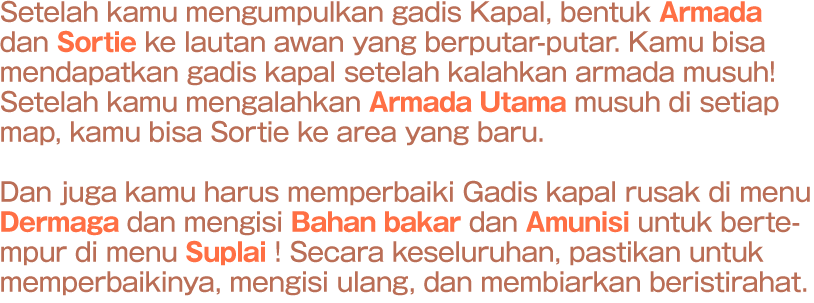
<style>
.page{position:relative;width:814px;height:303px;background:#ffffff}
.page>*{position:absolute;margin:0}
.t1{font:26px/30px "GothicMB101Pro-Medium";letter-spacing:-0.02em;color:#ba6e56;scale:0.95 1}
.t2{font:26px/30px "GothicMB101Pro-Bold";letter-spacing:-0.02em;color:#ff6f44;scale:0.95 1}
</style>
<div class="page">
<p class="t1" style="left:0px;top:0px;width:810px;height:296px">Setelah kamu mengumpulkan gadis Kapal, bentuk <span class="t2">Armada</span> <br>dan <span class="t2">Sortie</span> ke lautan awan yang berputar-putar. Kamu bisa <br>mendapatkan gadis kapal setelah kalahkan armada musuh!<br>Setelah kamu mengalahkan <span class="t2">Armada Utama</span> musuh di setiap<br>map, kamu bisa Sortie ke area yang baru.<br><br>Dan juga kamu harus memperbaiki Gadis kapal rusak di menu<br><span class="t2">Dermaga </span>dan mengisi <span class="t2">Bahan bakar</span> dan <span class="t2">Amunisi </span>untuk berte-<br>mpur di menu <span class="t2">Suplai</span> ! Secara keseluruhan, pastikan untuk <br>memperbaikinya, mengisi ulang, dan membiarkan beristirahat.</p>
</div>
